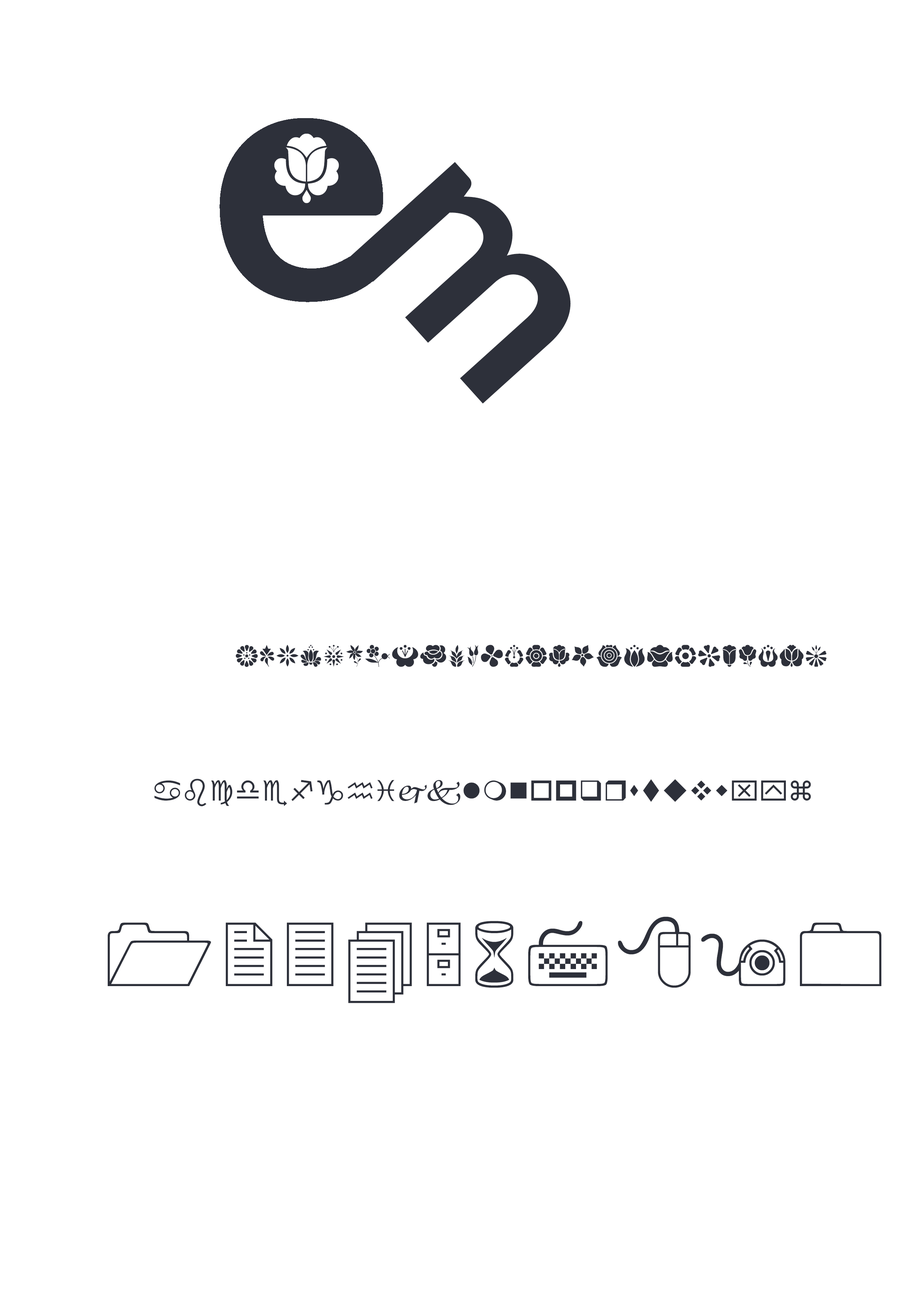
<style>
.page{position:relative;width:918px;height:1299px;background:#ffffff}
.page>*{position:absolute;margin:0}
.t1{font:87.7px "KalocsaiFlowers";color:#ffffff}
.t2{font:274.7px "Lato-Bold";color:#2d303a}
.t3{font:27.8px "KalocsaiFlowers";color:#2d303a}
</style>
<div class="page">
<p class="t1" style="left:274px;top:134px;width:65px;height:69px">o</p>
<p class="t2" style="left:350px;top:162px;width:221px;height:242px;rotate:48deg">m</p>
<p class="t3" style="left:236px;top:645px;width:591px;height:22px">abcdefghijklmnopqrstuvwxyz</p>
</div>
